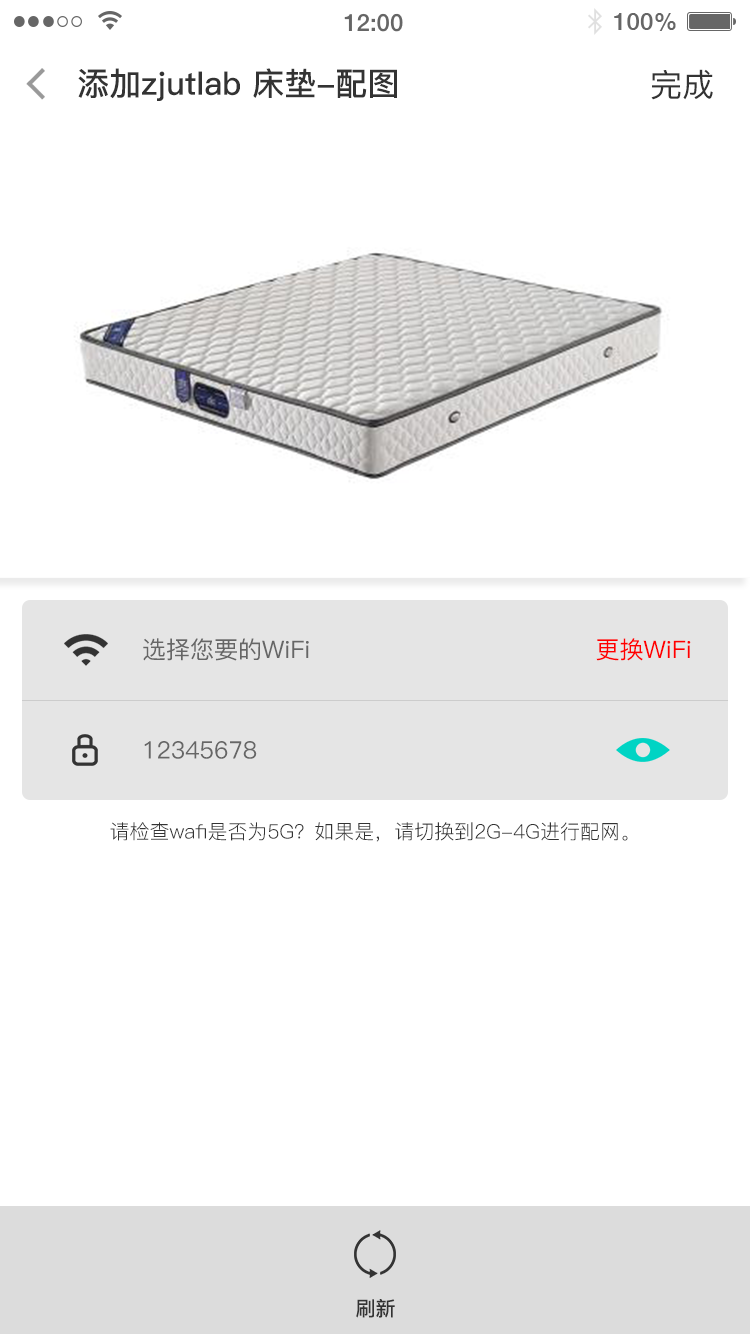
<style>
.page{position:relative;width:750px;height:1334px;background:#ffffff}
.page>*{position:absolute;margin:0}
.t1{font:32px "PingFang-SC-Bold";color:#333333}
.t2{font:32px "PingFang-SC-Medium";color:#333333}
.t3{font:24px "PingFang-SC-Medium";color:#666666}
.t4{font:24px "PingFang-SC-Medium";color:#ff0000}
.t5{font:20px "PingFang-SC-Regular";color:#333333}
.t6{font:20px "PingFang-SC-Bold";color:#333333}
</style>
<div class="page">
<p class="t1" style="left:78px;top:68px;width:319px;height:33px">添加zjutlab 床垫-配图</p>
<p class="t2" style="left:651px;top:69px;width:62px;height:31px">完成</p>
<p class="t3" style="left:143px;top:638px;width:166px;height:23px">选择您要的WiFi</p>
<p class="t4" style="left:596px;top:638px;width:95px;height:23px">更换WiFi</p>
<p class="t3" style="left:144px;top:741px;width:113px;height:18px">12345678</p>
<p class="t5" style="left:110px;top:822px;width:518px;height:20px">请检查wafi是否为5G？如果是，请切换到2G-4G进行配网。</p>
<p class="t6" style="left:356px;top:1299px;width:39px;height:19px">刷新</p>
</div>
